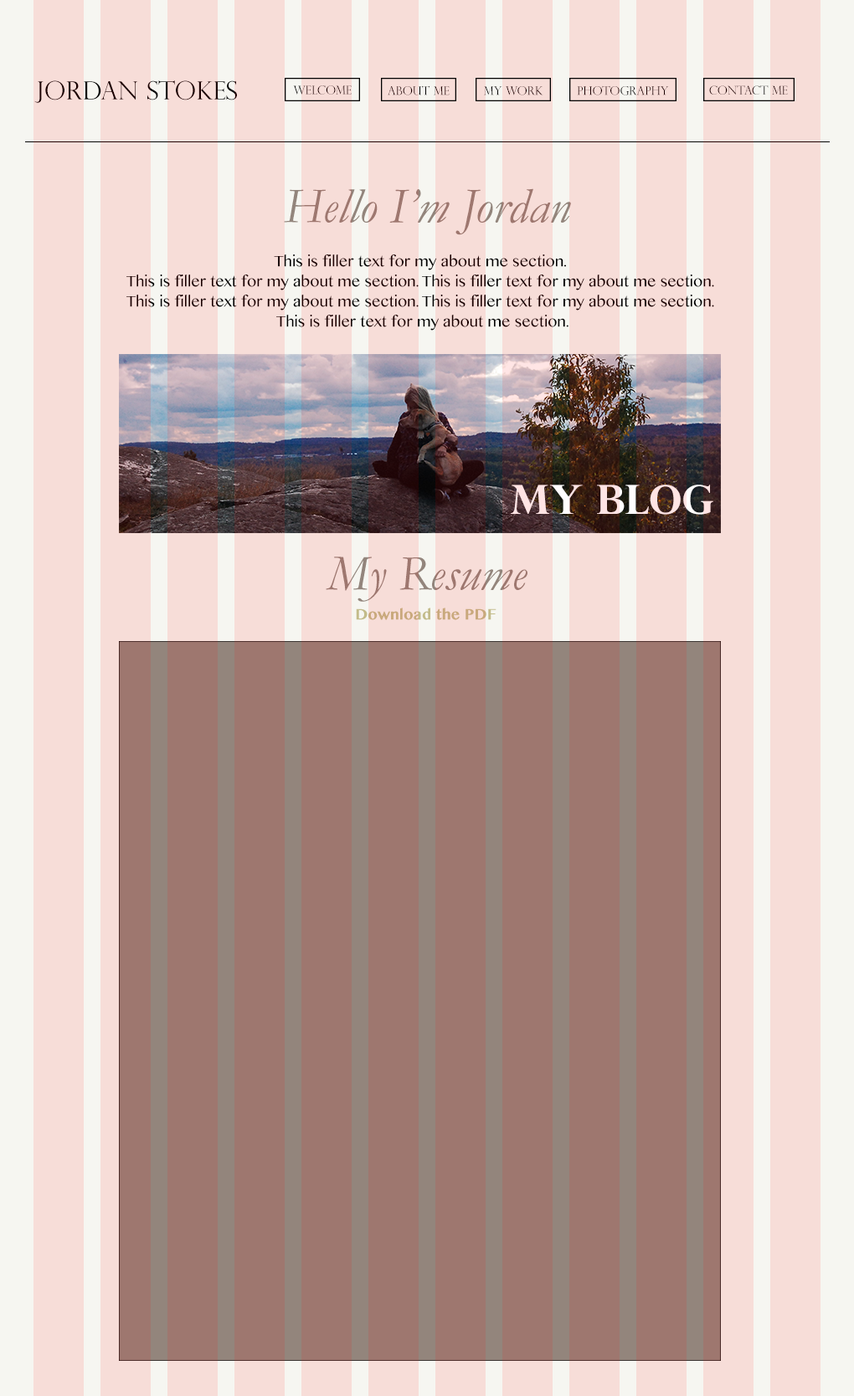
<style>
.page{position:relative;width:854px;height:1396px;background:#f7ddd8}
.page>*{position:absolute;margin:0}
.t1{font:25.1px "PerpetuaTitlingMT-Light";color:#1a0000}
.t2{font:11.7px "PerpetuaTitlingMT-Light";color:#1a0000}
.t3{font:11.7px "PerpetuaTitlingMT-Light"}
.t4{font:50.2px "Garamond-Italic";color:#93857c}
.t5{font:15.1px/20.1px "TamilMN";color:#1a0000}
.t6{font:40.2px "PerpetuaTitlingMT-Bold"}
.t7{font:15.1px "TamilMN-Bold";color:#c3bc8a}
</style>
<div class="page">
<p class="t1" style="left:34px;top:80px;width:203px;height:23px">Jordan Stokes</p>
<p class="t2" style="left:293px;top:85px;width:59px;height:10px">Welcome</p>
<p class="t3" style="left:388px;top:85px;width:62px;height:10px">About me</p>
<p class="t3" style="left:484px;top:86px;width:59px;height:9px">My work</p>
<p class="t2" style="left:577px;top:85px;width:92px;height:10px">photography</p>
<p class="t2" style="left:709px;top:85px;width:79px;height:10px">contact me</p>
<p class="t4" style="left:284px;top:188px;width:287px;height:47px">Hello I’m Jordan</p>
<p class="t5" style="left:126px;top:255px;width:588px;height:76px;text-align:center">This is filler text for my about me section. <br>This is filler text for my about me section. This is filler text for my about me section. <br>This is filler text for my about me section. This is filler text for my about me section. <br>This is filler text for my about me section.</p>
<p class="t6" style="left:511px;top:485px;width:202px;height:30px">My Blog</p>
<p class="t4" style="left:326px;top:557px;width:201px;height:45px">My Resume</p>
<p class="t7" style="left:356px;top:608px;width:140px;height:12px">Download the PDF</p>
</div>
